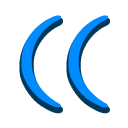
<style>
.page{position:relative;width:128px;height:128px;background:#ffffff}
.page>*{position:absolute;margin:0}
.t1{font:112px "AmericanTypewriter-Condensed";color:#008bff;scale:1.25 1}
</style>
<div class="page">
<p class="t1" style="left:21px;top:15px;width:87px;height:93px">((</p>
</div>
